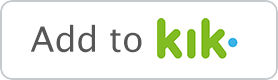
<style>
.page{position:relative;width:278px;height:80px;background:#ffffff}
.page>*{position:absolute;margin:0}
.t1{font:35px "LucidaGrande";color:#565656}
</style>
<div class="page">
<p class="t1" style="left:30px;top:24px;width:112px;height:29px">Add to</p>
</div>
